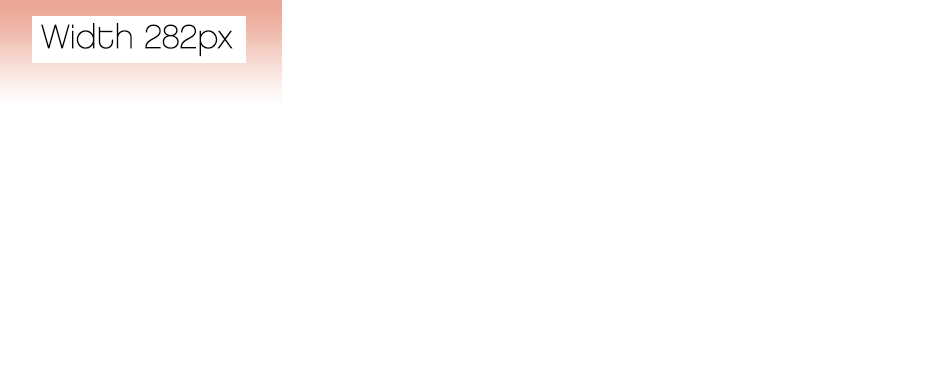
<style>
.page{position:relative;width:940px;height:370px;background:#ffffff}
.page>*{position:absolute;margin:0}
.t1{font:34px "Chalet-ParisNineteenEighty";color:#000000}
</style>
<div class="page">
<p class="t1" style="left:41px;top:23px;width:192px;height:34px">Width 282px</p>
</div>
